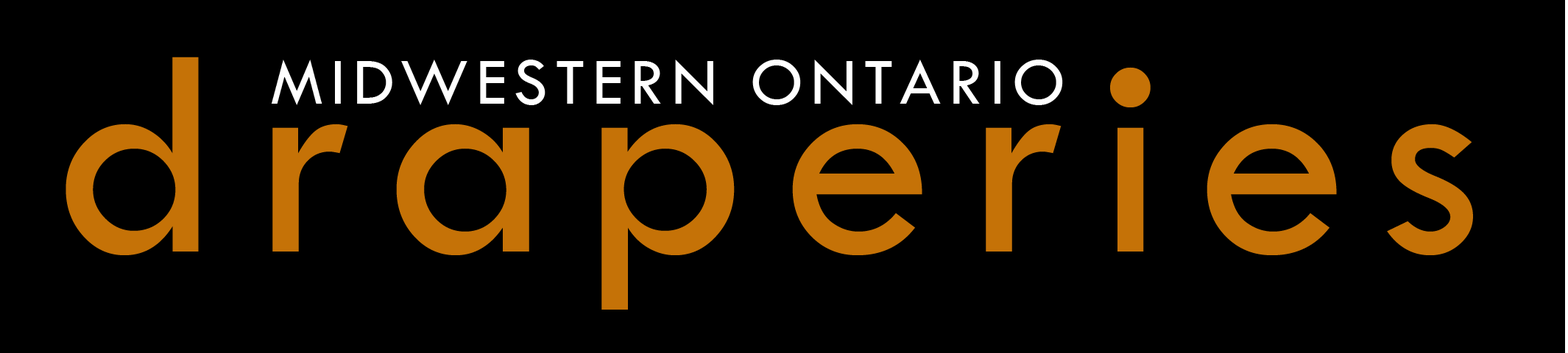
<style>
.page{position:relative;width:1568px;height:353px;background:#000000}
.page>*{position:absolute;margin:0}
.t1{font:306.7px "TwCenMT-Regular";letter-spacing:0.1em;color:#c57207}
.t2{font:69.3px "TwCenMT-Regular";letter-spacing:0.1em;color:#ffffff}
</style>
<div class="page">
<p class="t1" style="left:66px;top:57px;width:1407px;height:253px">draperies</p>
<p class="t2" style="left:271px;top:60px;width:792px;height:45px">MIDWESTERN ONTARIO</p>
</div>
